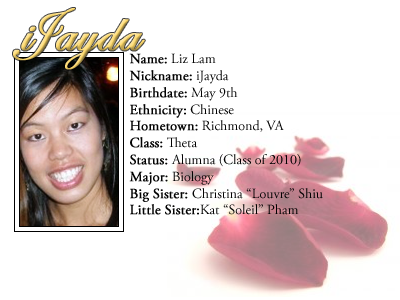
<style>
.page{position:relative;width:400px;height:300px;background:#ffffff}
.page>*{position:absolute;margin:0}
.t1{font:60px "EdwardianScriptITC";font-weight:bold}
.t2{font:14px "AGaramondPro-Regular";color:#000000}
.t3{font:14px "AGaramondPro-Regular";color:#000000;font-weight:bold}
</style>
<div class="page">
<p class="t1" style="left:21px;top:26px;width:16px;height:25px">i</p>
<p class="t2" style="left:129px;top:53px;width:194px;height:162px"><span class="t3">Name:</span> Liz Lam<br><span class="t3">Nickname:</span> iJayda<br><span class="t3">Birthdate:</span> May 9th<br><span class="t3">Ethnicity:</span> Chinese<br><span class="t3">Hometown:</span> Richmond, VA<br><span class="t3">Class:</span> Theta<br><span class="t3">Status: </span>Alumna (Class of 2010)<br><span class="t3">Major:</span> Biology<br><span class="t3">Big Sister: </span>Christina “Louvre” Shiu<br><span class="t3">Little Sister:</span>Kat “Soleil” Pham</p>
</div>
